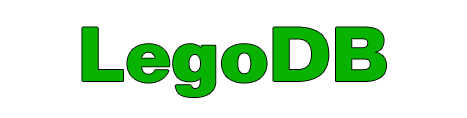
<style>
.page{position:relative;width:467px;height:118px;background:#ffffff}
.page>*{position:absolute;margin:0}
.t1{font:75px "Folio-Bold";color:#08b300}
</style>
<div class="page">
<p class="t1" style="left:82px;top:27px;width:304px;height:70px">LegoDB</p>
</div>
